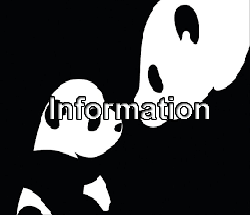
<style>
.page{position:relative;width:250px;height:215px;background:#030406}
.page>*{position:absolute;margin:0}
.t1{font:30px "Arial-BoldMT"}
</style>
<div class="page">
<p class="t1" style="left:50px;top:97px;width:159px;height:22px">Information</p>
</div>
